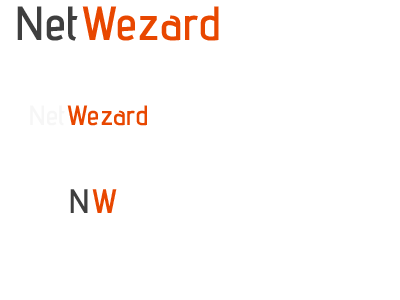
<style>
.page{position:relative;width:400px;height:300px;background:#ffffff}
.page>*{position:absolute;margin:0}
.t1{font:48px "AdventPro-SemiBold";color:#e84700}
.t2{font:48px "AdventPro-SemiBold";color:#3f3f3f}
.t3{font:28px "AdventPro-SemiBold";color:#e84700}
.t4{font:28px "AdventPro-SemiBold";color:#f6f6f6}
.t5{font:34px "AdventPro-SemiBold";color:#3f3f3f}
.t6{font:34px "AdventPro-SemiBold";color:#e84700}
</style>
<div class="page">
<p class="t1" style="left:17px;top:6px;width:202px;height:35px"><span class="t2">Net</span>Wezard</p>
<p class="t3" style="left:30px;top:105px;width:117px;height:21px"><span class="t4">Net</span>Wezard</p>
<p class="t5" style="left:70px;top:189px;width:47px;height:24px">N<span class="t6">W</span></p>
</div>
